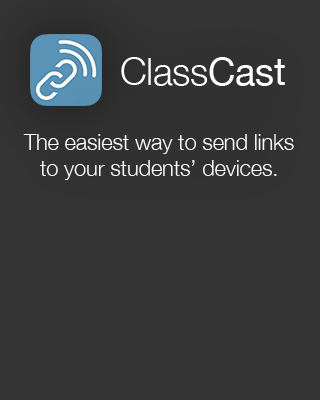
<style>
.page{position:relative;width:320px;height:400px;background:#333333}
.page>*{position:absolute;margin:0}
.t1{font:38px "HelveticaNeue-Light";letter-spacing:-0.01em;color:#ffffff}
.t2{font:38px "HelveticaNeue";letter-spacing:-0.01em;color:#ffffff}
.t3{font:22px "HelveticaNeue-Light";letter-spacing:-0.01em;color:#ffffff}
</style>
<div class="page">
<p class="t1" style="left:121px;top:57px;width:164px;height:29px">Class<span class="t2">Cast</span></p>
<p class="t3" style="left:23px;top:134px;width:271px;height:46px;text-align:center">The easiest way to send links to your students’ devices.</p>
</div>
